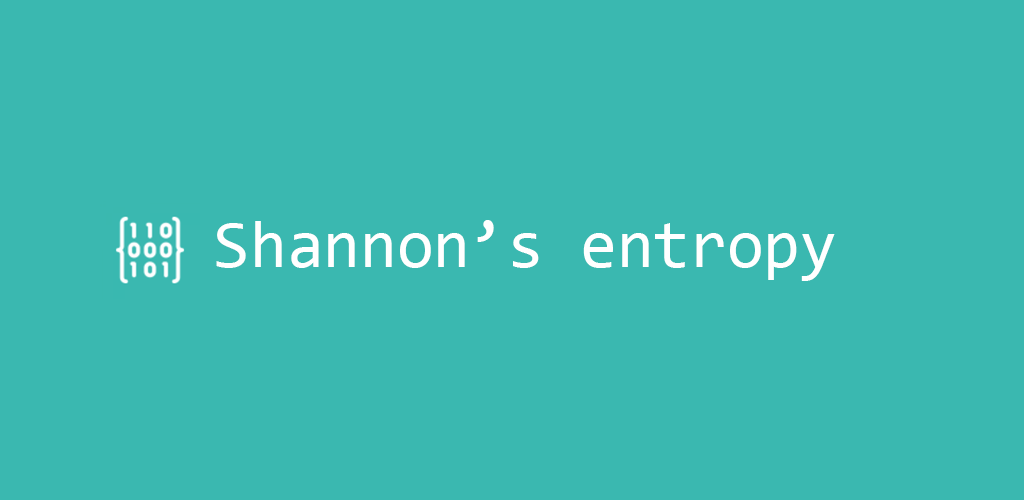
<style>
.page{position:relative;width:1024px;height:500px;background:#3ab8b0}
.page>*{position:absolute;margin:0}
.t1{font:66.7px "Consolas";color:#ffffff}
</style>
<div class="page">
<p class="t1" style="left:216px;top:220px;width:619px;height:61px">Shannon’s entropy</p>
</div>
